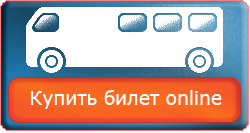
<style>
.page{position:relative;width:250px;height:133px;background:#ffffff}
.page>*{position:absolute;margin:0}
.t1{font:18.7px "MSReferenceSansSerif";color:#ffffff}
</style>
<div class="page">
<p class="t1" style="left:31px;top:90px;width:191px;height:19px">Купить билет online</p>
</div>
